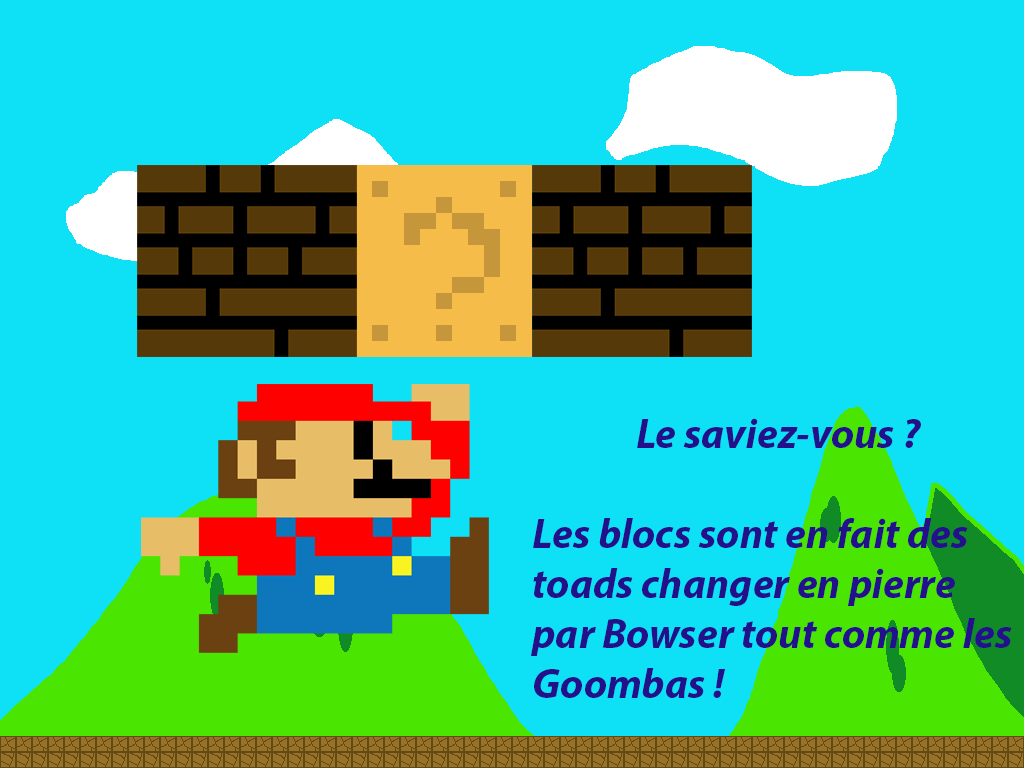
<style>
.page{position:relative;width:1024px;height:768px;background:#0ee1f6}
.page>*{position:absolute;margin:0}
.t1{font:41.7px "MyriadPro-BoldIt";color:#22118b}
</style>
<div class="page">
<p class="t1" style="left:531px;top:418px;width:481px;height:280px;text-align:center">Le saviez-vous ?<br><br>Les blocs sont en fait des toads changer en pierre par Bowser tout comme les Goombas !</p>
</div>
